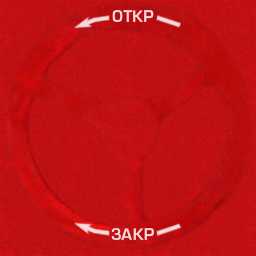
<style>
.page{position:relative;width:256px;height:256px}
.page>*{position:absolute;margin:0}
.t1{font:14.9px "EuropeDemi";color:#f4dbdb}
.t2{font:14.9px "EuropeDemi";color:#f5dbdb}
</style>
<div class="page">
<p class="t1" style="left:112px;top:10px;width:42px;height:12px">ОТКР</p>
<p class="t2" style="left:111px;top:228px;width:43px;height:12px">ЗАКР</p>
</div>
